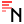
<style>
.page{position:relative;width:24px;height:24px;background:#ffffff}
.page>*{position:absolute;margin:0}
.t1{font:16px "Component";color:#000000}
.t2{font:8px "Component";color:#ff3f3f}
</style>
<div class="page">
<p class="t1" style="left:11px;top:8px;width:11px;height:14px"><span class="t2"><br></span>N</p>
</div>
